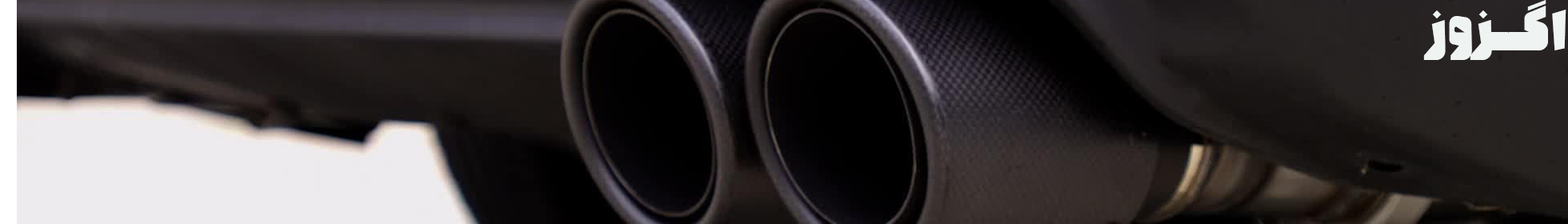
<style>
.page{position:relative;width:1568px;height:224px}
.page>*{position:absolute;margin:0}
.t1{font:71.2px "Kaghaz-Bold";color:#eff3f2}
</style>
<div class="page">
<p class="t1" style="left:1423px;top:0px;width:143px;height:60px">اگــزوز</p>
</div>
